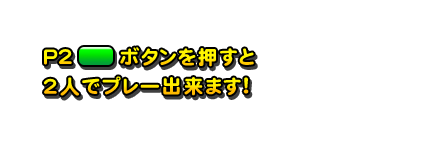
<style>
.page{position:relative;width:426px;height:152px;background:#ffffff}
.page>*{position:absolute;margin:0}
.t1{font:20px "DFMaruGothic-SB-WING-RKSJ-H";color:#fff600}
.t2{font:20px "DFMaruGothic-SB-WING-RKSJ-H";letter-spacing:0.1em;color:#fff600}
.t3{font:20px "DFMaruGothic-SB-WING-RKSJ-H";letter-spacing:0.1em}
</style>
<div class="page">
<p class="t1" style="left:44px;top:49px;width:28px;height:16px">P2</p>
<p class="t2" style="left:120px;top:47px;width:134px;height:20px">ボタンを押すと</p>
<p class="t3" style="left:43px;top:76px;width:206px;height:20px">2人でプレー出来ます!</p>
</div>
